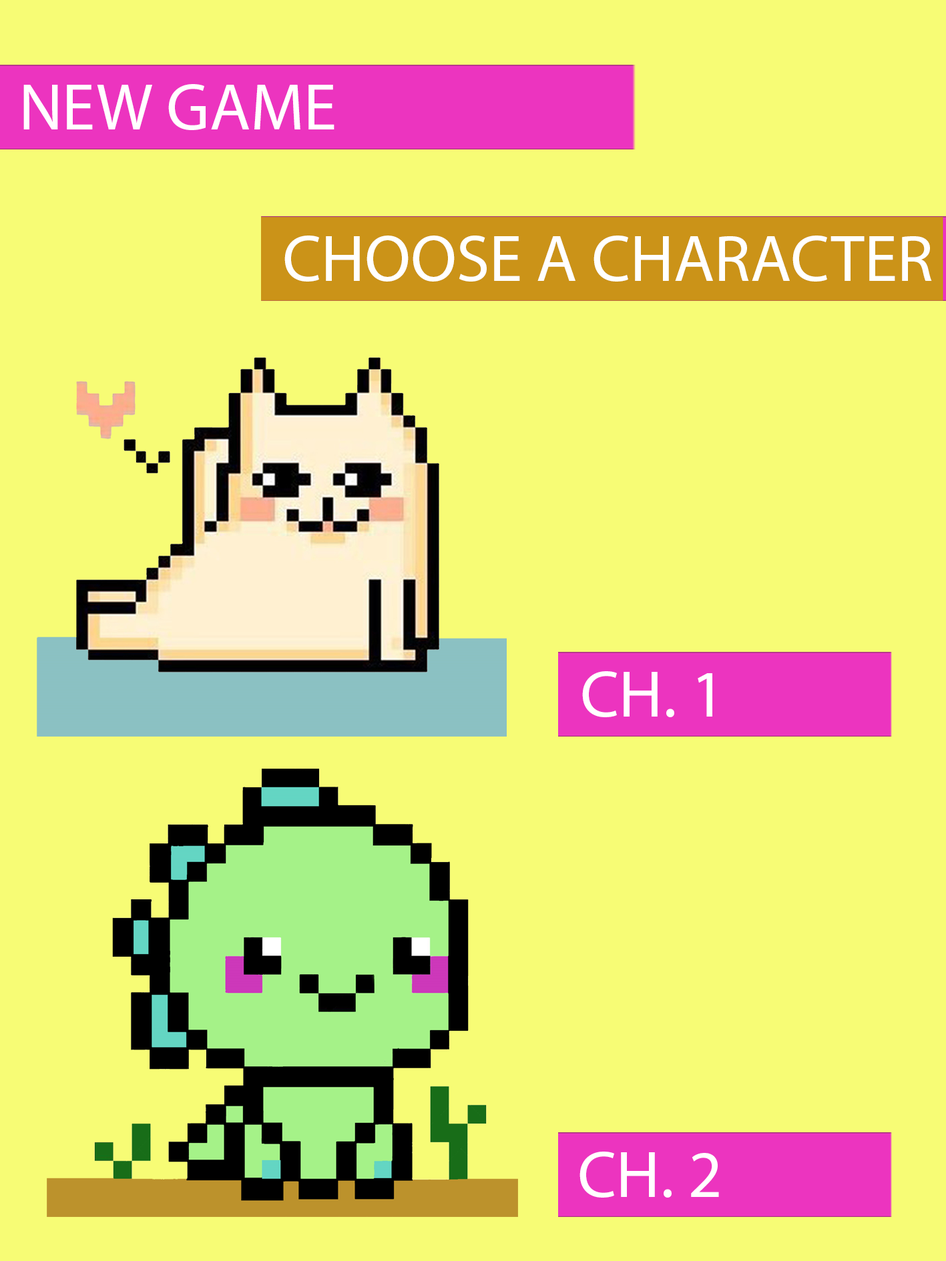
<style>
.page{position:relative;width:946px;height:1261px;background:#f7fc75}
.page>*{position:absolute;margin:0}
.t1{font:66.7px "MyriadPro-Regular";color:#ffffff}
</style>
<div class="page">
<p class="t1" style="left:23px;top:84px;width:311px;height:46px">NEW GAME</p>
<p class="t1" style="left:284px;top:236px;width:648px;height:46px">CHOOSE A CHARACTER</p>
<p class="t1" style="left:582px;top:671px;width:130px;height:46px">CH. 1</p>
<p class="t1" style="left:579px;top:1152px;width:140px;height:46px">CH. 2</p>
</div>
